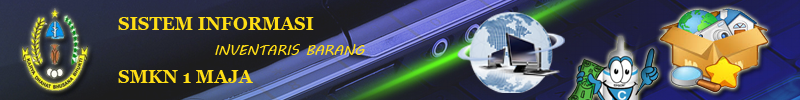
<style>
.page{position:relative;width:800px;height:100px}
.page>*{position:absolute;margin:0}
.t1{font:18px "Georgia-Bold";color:#ffde15}
.t2{font:14px "MVBoli";color:#ffde15}
</style>
<div class="page">
<p class="t1" style="left:118px;top:17px;width:196px;height:13px">SISTEM INFORMASI</p>
<p class="t2" style="left:215px;top:44px;width:150px;height:11px">INVENTARIS BARANG</p>
<p class="t1" style="left:118px;top:70px;width:135px;height:13px">SMKN 1 MAJA</p>
</div>
